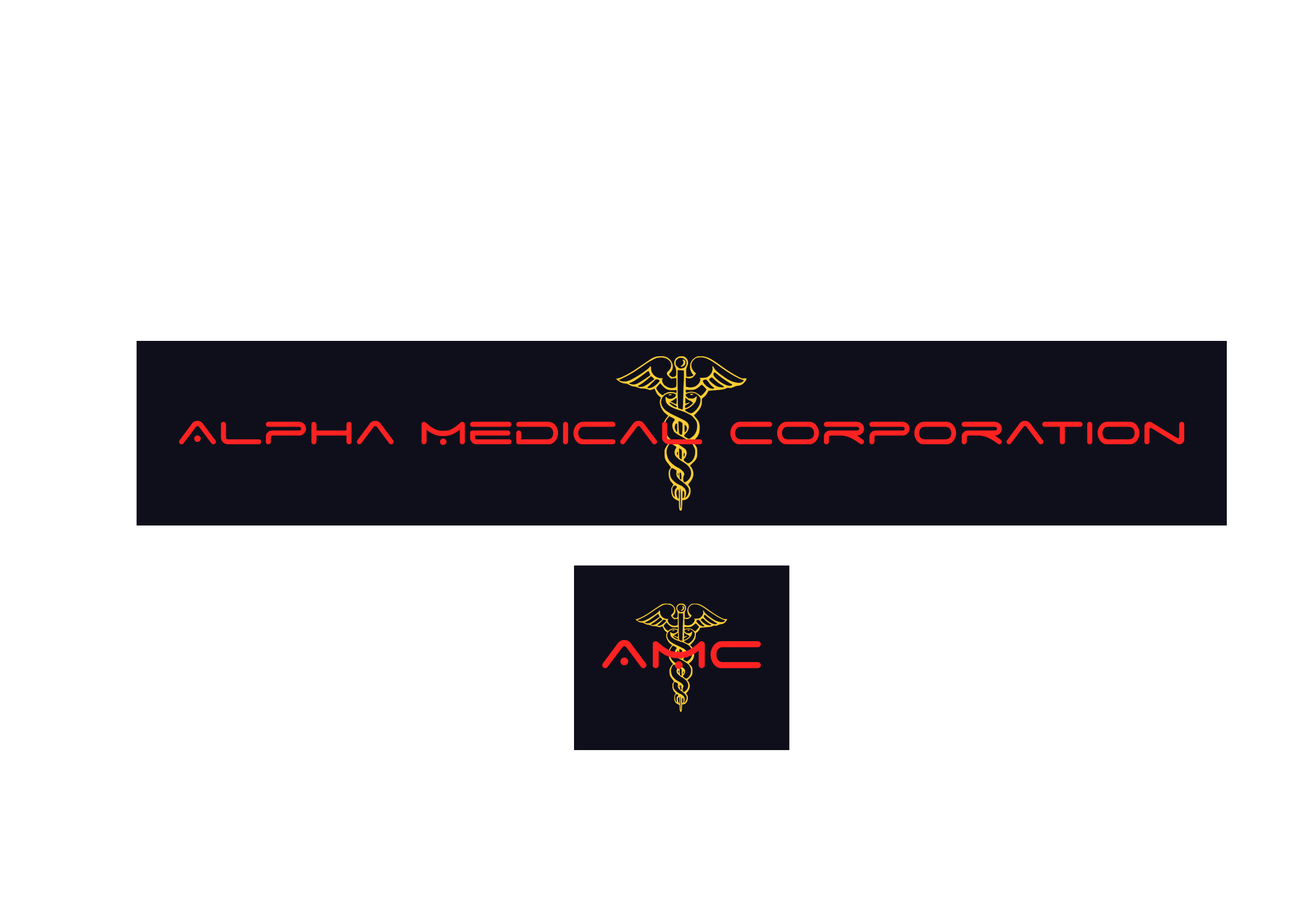
<style>
.page{position:relative;width:1292px;height:923px;background:#ffffff}
.page>*{position:absolute;margin:0}
.t1{font:51.3px "SpaceAge";color:#fe2222}
.t2{font:61.5px "SpaceAge";color:#fe2222}
</style>
<div class="page">
<p class="t1" style="left:179px;top:421px;width:1005px;height:24px">Alpha Medical Corporation</p>
<p class="t2" style="left:602px;top:640px;width:159px;height:29px">AMC</p>
</div>
